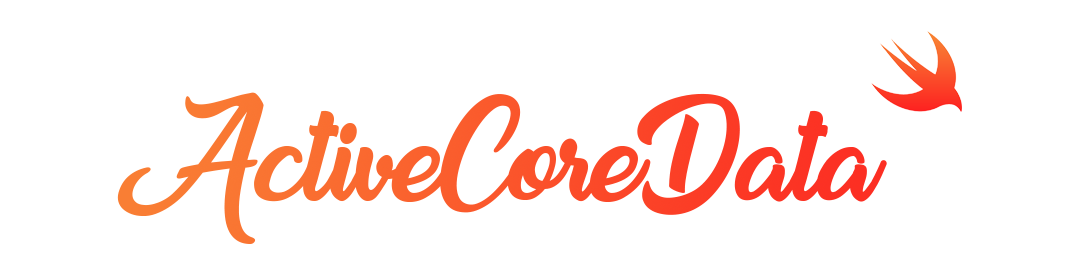
<style>
.page{position:relative;width:1080px;height:275px;background:#ffffff}
.page>*{position:absolute;margin:0}
.t1{font:148.5px "SweetSensationsPersonalUse"}
</style>
<div class="page">
<p class="t1" style="left:117px;top:92px;width:770px;height:152px">ActiveCoreData</p>
</div>
